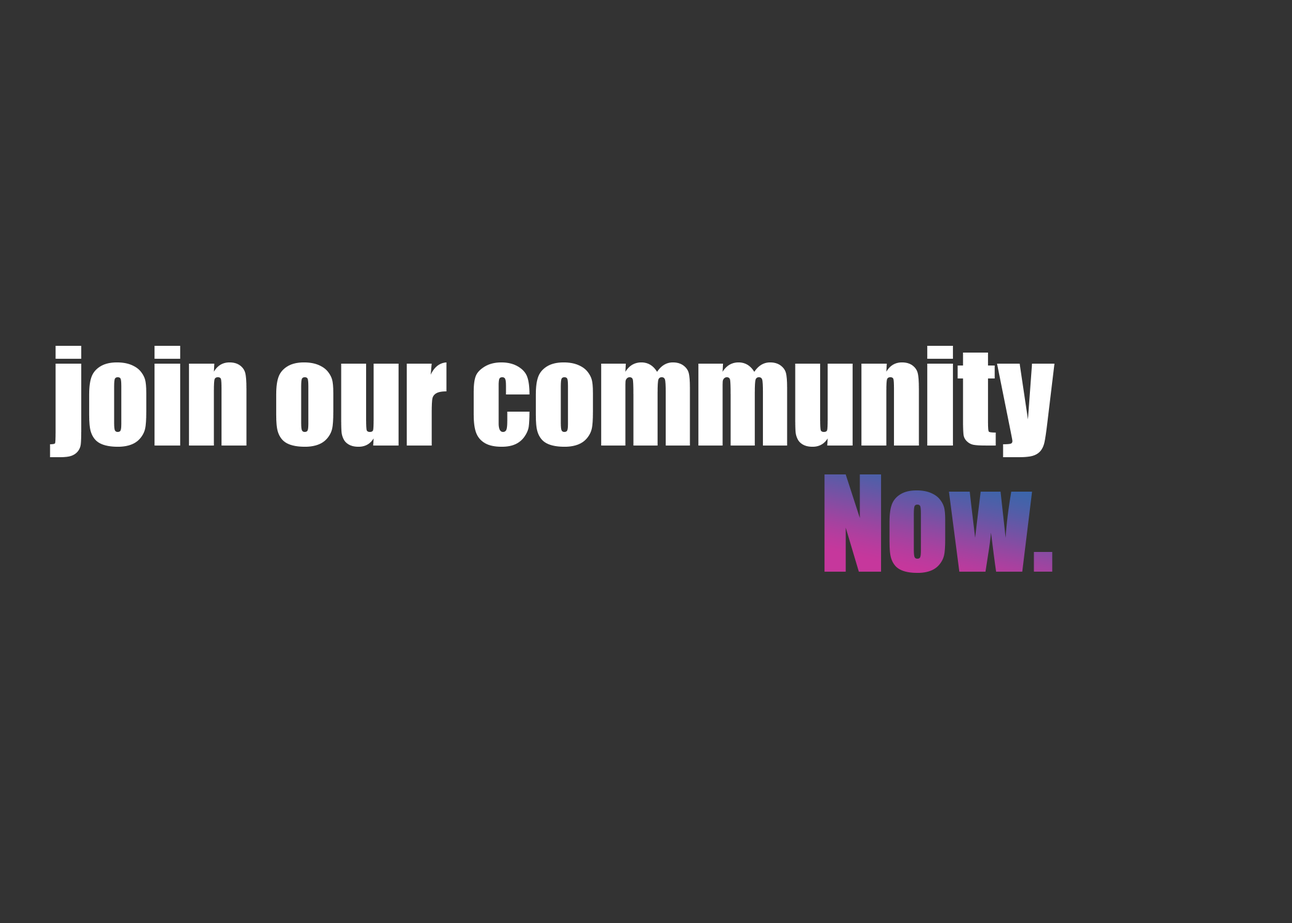
<style>
.page{position:relative;width:1292px;height:923px;background:#333333}
.page>*{position:absolute;margin:0}
.t1{font:126px "Impact";color:#ffffff}
.t2{font:123.2px "Impact"}
</style>
<div class="page">
<p class="t1" style="left:50px;top:346px;width:1005px;height:111px">join our community</p>
<p class="t2" style="left:824px;top:474px;width:229px;height:99px">Now.</p>
</div>
